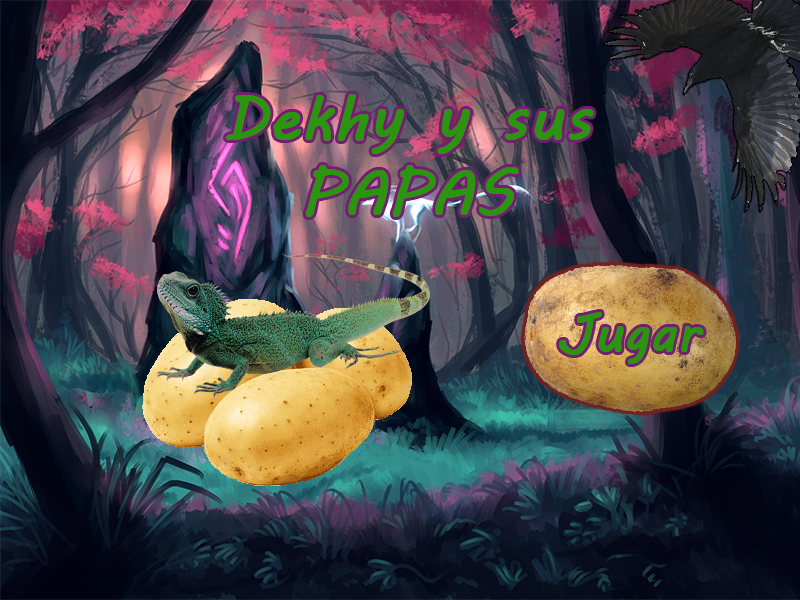
<style>
.page{position:relative;width:800px;height:600px}
.page>*{position:absolute;margin:0}
.t1{font:62px "MVBoli";color:#2c950f;font-weight:bold}
</style>
<div class="page">
<p class="t1" style="left:226px;top:94px;width:368px;height:123px;text-align:center">Dekhy y sus PAPAS</p>
</div>
